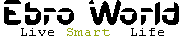
<style>
.page{position:relative;width:183px;height:39px;background:#ffffff}
.page>*{position:absolute;margin:0}
.t1{font:36px "GameTricksDemoRegular";color:#000000;scale:1.09 1}
.t2{font:12px "CourierNewPSMT";color:#94a80d;scale:1.27 1}
.t3{font:12px "CourierNewPSMT";color:#000000;scale:1.27 1}
</style>
<div class="page">
<p class="t1" style="left:4px;top:0px;width:175px;height:25px">Ebro World</p>
<p class="t2" style="left:21px;top:28px;width:143px;height:8px"><span class="t3">Live </span>Smart<span class="t3">  Life</span></p>
</div>
